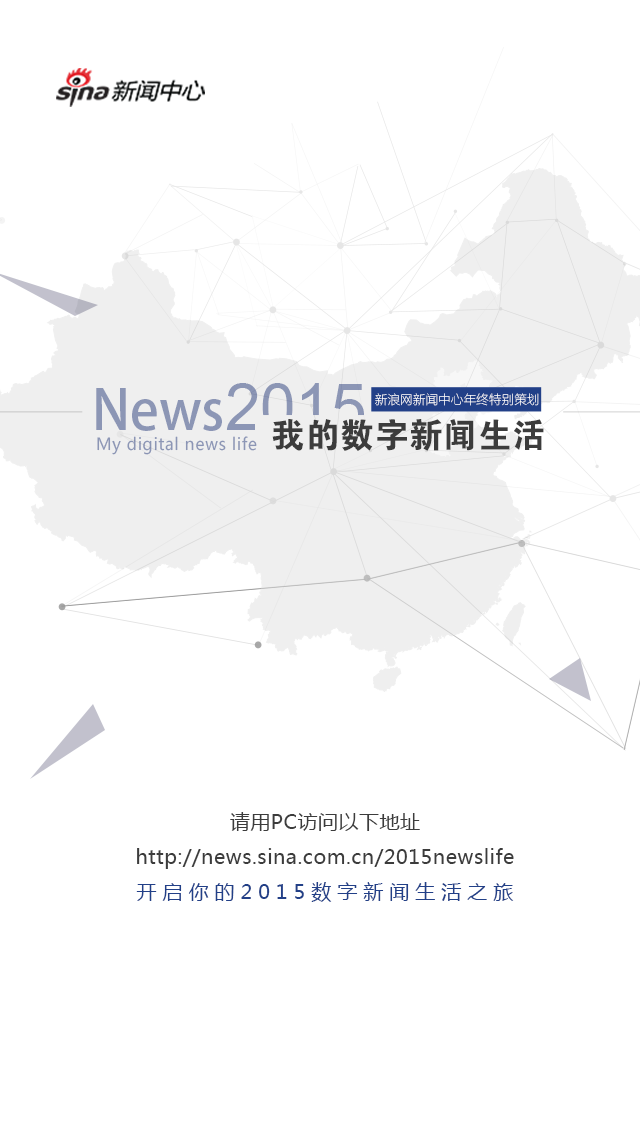
<style>
.page{position:relative;width:640px;height:1136px;background:#ffffff}
.page>*{position:absolute;margin:0}
.t1{font:54.6px "AdobeHeitiStd-Regular";color:#8c96b5}
.t2{font:65.2px "ArialMT";color:#8c96b5}
.t3{font:13px "FZLTCXHJW--GB1-0";color:#ffffff}
.t4{font:34.4px "FZDHTJW--GB1-0";letter-spacing:0.027em;color:#3c3c3c}
.t5{font:16.4px "MicrosoftYaHei";letter-spacing:0.04em;color:#8c96b5}
.t6{font:20px "MicrosoftYaHei";letter-spacing:0.027em;color:#3c3c3c}
.t7{font:20px "MicrosoftYaHei";letter-spacing:0.3em;color:#224088}
</style>
<div class="page">
<p class="t1" style="left:96px;top:383px;width:268px;height:48px">News<span class="t2">2015</span></p>
<p class="t3" style="left:375px;top:393px;width:164px;height:13px">新浪网新闻中心年终特别策划</p>
<p class="t4" style="left:272px;top:419px;width:272px;height:32px">我的数字新闻生活</p>
<p class="t5" style="left:97px;top:436px;width:160px;height:19px">My digital news life</p>
<p class="t6" style="left:136px;top:812px;width:378px;height:90px;text-align:center">请用PC访问以下地址<br>http://news.sina.com.cn/2015newslife<br><span class="t7">开启你的2015数字新闻生活之旅</span></p>
</div>
